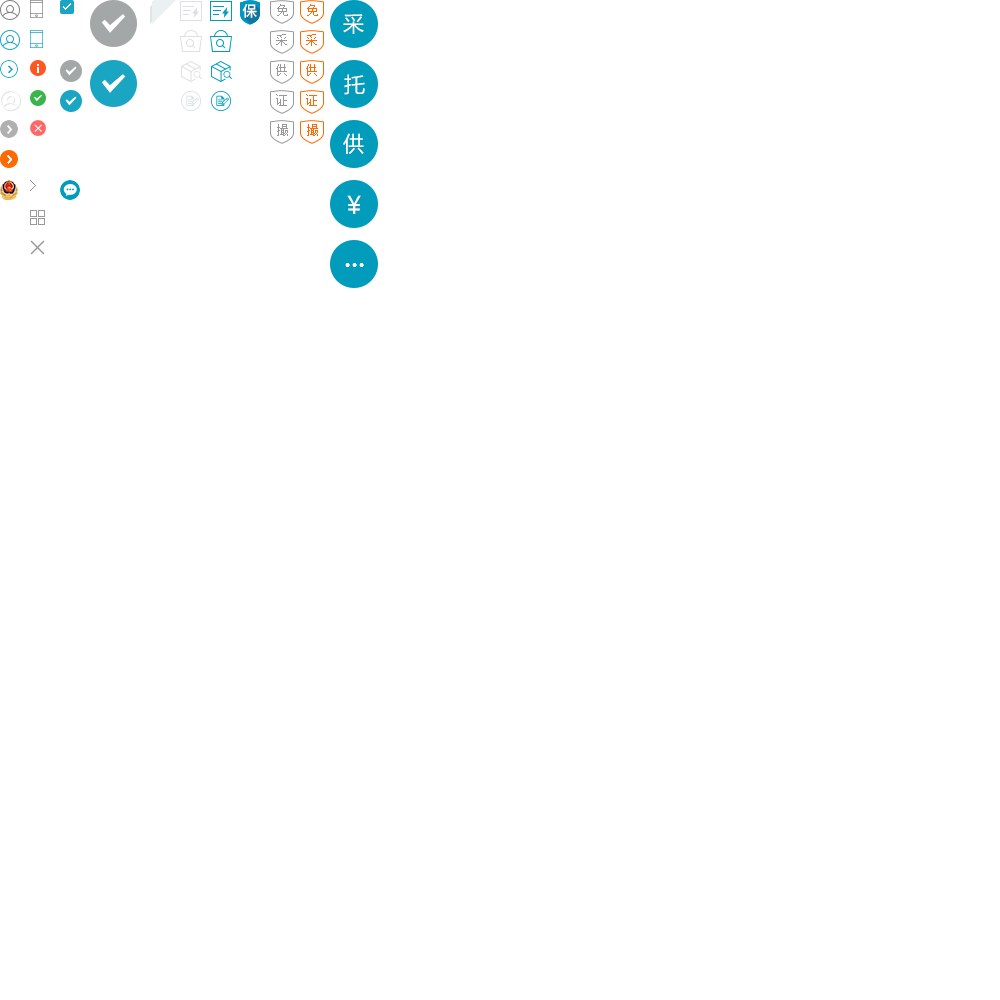
<style>
.page{position:relative;width:1000px;height:1000px;background:#ffffff}
.page>*{position:absolute;margin:0}
.t1{font:13px "SimSun";color:#999999}
.t2{font:13px "SimSun";color:#ff6a00}
</style>
<div class="page">
<p class="t1" style="left:277px;top:4px;width:11px;height:12px">免</p>
<p class="t2" style="left:307px;top:4px;width:11px;height:12px">免</p>
<p class="t1" style="left:276px;top:34px;width:11px;height:12px">采</p>
<p class="t2" style="left:306px;top:34px;width:11px;height:12px">采</p>
<p class="t1" style="left:276px;top:64px;width:11px;height:12px">供</p>
<p class="t2" style="left:306px;top:64px;width:11px;height:12px">供</p>
<p class="t1" style="left:276px;top:94px;width:11px;height:12px">证</p>
<p class="t2" style="left:306px;top:94px;width:11px;height:12px">证</p>
<p class="t1" style="left:277px;top:124px;width:11px;height:12px">撮</p>
<p class="t2" style="left:307px;top:124px;width:11px;height:12px">撮</p>
</div>
